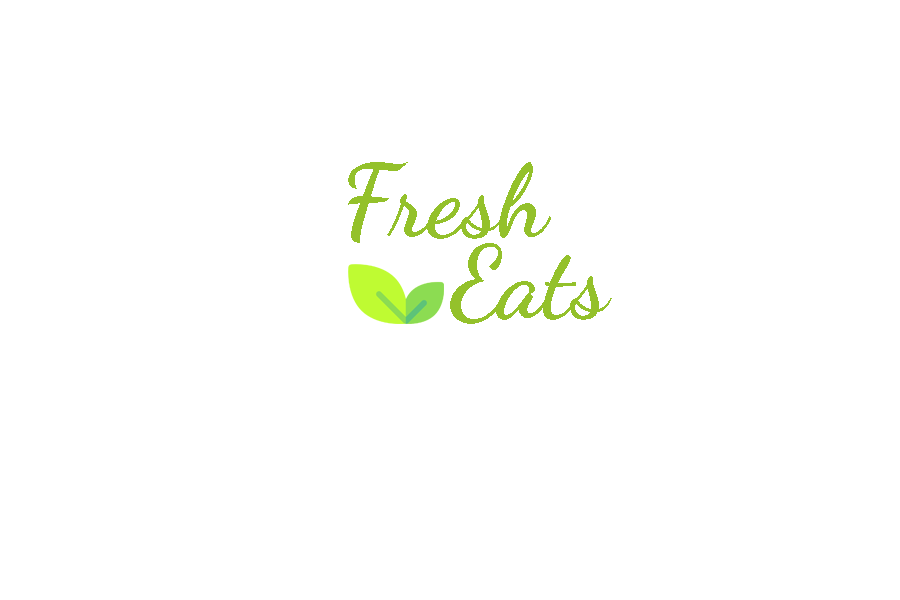
<style>
.page{position:relative;width:900px;height:600px;background:#ffffff}
.page>*{position:absolute;margin:0}
.t1{font:100px "DancingScript-Bold";color:#94c12b}
</style>
<div class="page">
<p class="t1" style="left:348px;top:162px;width:203px;height:81px">Fresh</p>
<p class="t1" style="left:450px;top:243px;width:162px;height:81px">Eats</p>
</div>
